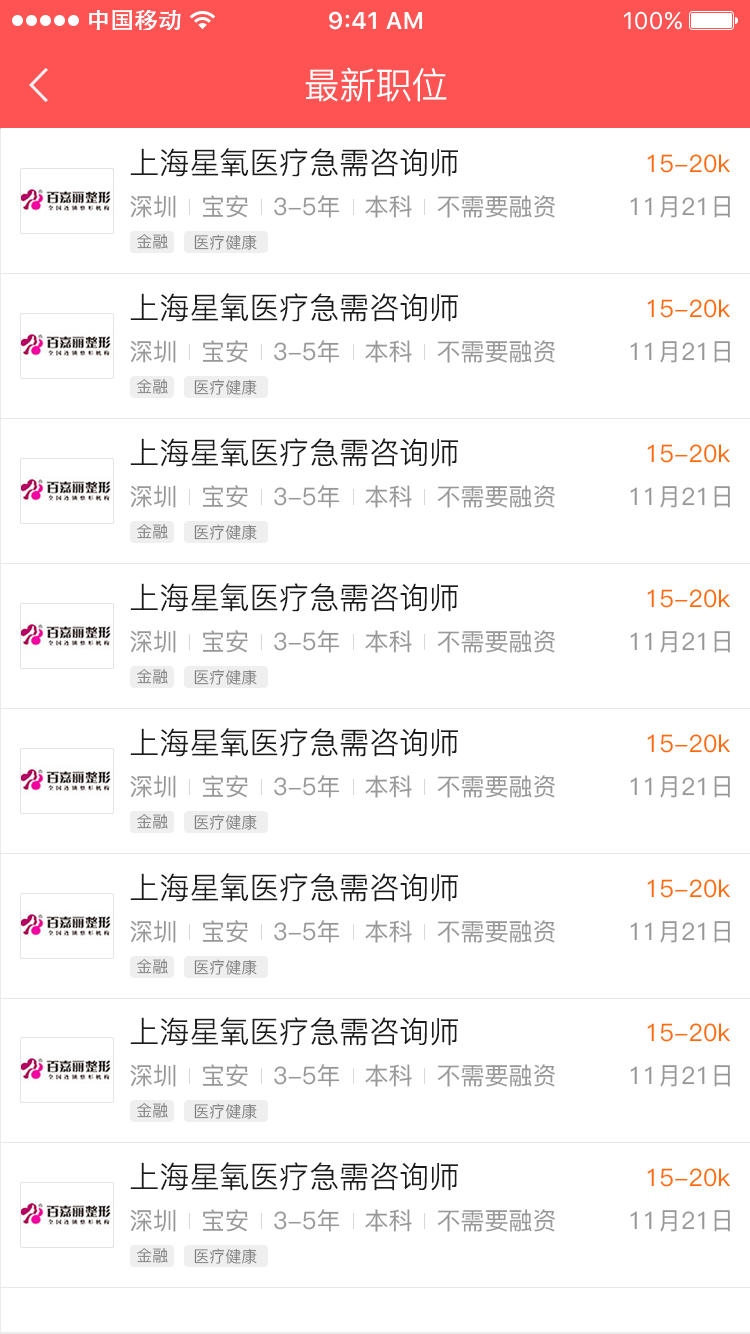
<style>
.page{position:relative;width:750px;height:1334px;background:#ffffff}
.page>*{position:absolute;margin:0}
.t1{font:36px "PingFang-SC-Regular";color:#ffffff}
.t2{font:30px "PingFang-SC-Regular";color:#1b1b1b}
.t3{font:24px "PingFang-SC-Medium";color:#ff6c05}
.t4{font:24px "PingFang-SC-Medium";color:#989898}
.t5{font:16px "PingFang-SC-Regular";color:#7d7d7d}
.t6{font:16px "PingFang-SC-Regular";color:#7c7c7c}
</style>
<div class="page">
<p class="t1" style="left:305px;top:67px;width:142px;height:35px">最新职位</p>
<p class="t2" style="left:130px;top:148px;width:328px;height:29px">上海星氧医疗急需咨询师</p>
<p class="t3" style="left:647px;top:154px;width:83px;height:19px">15-20k</p>
<p class="t4" style="left:130px;top:195px;width:425px;height:23px">深圳   宝安   3-5年   本科   不需要融资</p>
<p class="t4" style="left:630px;top:196px;width:100px;height:22px">11月21日</p>
<p class="t5" style="left:137px;top:233px;width:31px;height:16px">金融</p>
<p class="t6" style="left:194px;top:234px;width:63px;height:16px">医疗健康</p>
<p class="t2" style="left:130px;top:293px;width:328px;height:29px">上海星氧医疗急需咨询师</p>
<p class="t3" style="left:647px;top:299px;width:83px;height:19px">15-20k</p>
<p class="t4" style="left:130px;top:340px;width:425px;height:23px">深圳   宝安   3-5年   本科   不需要融资</p>
<p class="t4" style="left:630px;top:341px;width:100px;height:22px">11月21日</p>
<p class="t5" style="left:137px;top:378px;width:31px;height:16px">金融</p>
<p class="t6" style="left:194px;top:379px;width:63px;height:16px">医疗健康</p>
<p class="t2" style="left:130px;top:438px;width:328px;height:29px">上海星氧医疗急需咨询师</p>
<p class="t3" style="left:647px;top:444px;width:83px;height:19px">15-20k</p>
<p class="t4" style="left:130px;top:485px;width:425px;height:23px">深圳   宝安   3-5年   本科   不需要融资</p>
<p class="t4" style="left:630px;top:486px;width:100px;height:22px">11月21日</p>
<p class="t5" style="left:137px;top:523px;width:31px;height:16px">金融</p>
<p class="t6" style="left:194px;top:524px;width:63px;height:16px">医疗健康</p>
<p class="t2" style="left:130px;top:583px;width:328px;height:29px">上海星氧医疗急需咨询师</p>
<p class="t3" style="left:647px;top:589px;width:83px;height:19px">15-20k</p>
<p class="t4" style="left:130px;top:630px;width:425px;height:23px">深圳   宝安   3-5年   本科   不需要融资</p>
<p class="t4" style="left:630px;top:631px;width:100px;height:22px">11月21日</p>
<p class="t5" style="left:137px;top:668px;width:31px;height:16px">金融</p>
<p class="t6" style="left:194px;top:669px;width:63px;height:16px">医疗健康</p>
<p class="t2" style="left:130px;top:728px;width:328px;height:29px">上海星氧医疗急需咨询师</p>
<p class="t3" style="left:647px;top:734px;width:83px;height:19px">15-20k</p>
<p class="t4" style="left:130px;top:775px;width:425px;height:23px">深圳   宝安   3-5年   本科   不需要融资</p>
<p class="t4" style="left:630px;top:776px;width:100px;height:22px">11月21日</p>
<p class="t5" style="left:137px;top:813px;width:31px;height:16px">金融</p>
<p class="t6" style="left:194px;top:814px;width:63px;height:16px">医疗健康</p>
<p class="t2" style="left:130px;top:873px;width:328px;height:29px">上海星氧医疗急需咨询师</p>
<p class="t3" style="left:647px;top:879px;width:83px;height:19px">15-20k</p>
<p class="t4" style="left:130px;top:920px;width:425px;height:23px">深圳   宝安   3-5年   本科   不需要融资</p>
<p class="t4" style="left:630px;top:921px;width:100px;height:22px">11月21日</p>
<p class="t5" style="left:137px;top:958px;width:31px;height:16px">金融</p>
<p class="t6" style="left:194px;top:959px;width:63px;height:16px">医疗健康</p>
<p class="t2" style="left:130px;top:1017px;width:328px;height:29px">上海星氧医疗急需咨询师</p>
<p class="t3" style="left:647px;top:1023px;width:83px;height:19px">15-20k</p>
<p class="t4" style="left:130px;top:1064px;width:425px;height:23px">深圳   宝安   3-5年   本科   不需要融资</p>
<p class="t4" style="left:630px;top:1065px;width:100px;height:22px">11月21日</p>
<p class="t5" style="left:137px;top:1102px;width:31px;height:16px">金融</p>
<p class="t6" style="left:194px;top:1103px;width:63px;height:16px">医疗健康</p>
<p class="t2" style="left:130px;top:1162px;width:328px;height:29px">上海星氧医疗急需咨询师</p>
<p class="t3" style="left:647px;top:1168px;width:83px;height:19px">15-20k</p>
<p class="t4" style="left:130px;top:1209px;width:425px;height:23px">深圳   宝安   3-5年   本科   不需要融资</p>
<p class="t4" style="left:630px;top:1210px;width:100px;height:22px">11月21日</p>
<p class="t5" style="left:137px;top:1247px;width:31px;height:16px">金融</p>
<p class="t6" style="left:194px;top:1248px;width:63px;height:16px">医疗健康</p>
</div>
